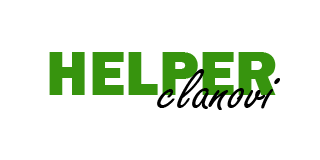
<style>
.page{position:relative;width:320px;height:160px;background:#ffffff}
.page>*{position:absolute;margin:0}
.t1{font:65.3px "FranklinGothic-Heavy";color:#37940e;scale:0.96 1}
.t2{font:61.7px "FreestyleScript-Regular";color:#000000;scale:1.13 1}
</style>
<div class="page">
<p class="t1" style="left:49px;top:52px;width:227px;height:43px">HELPER</p>
<p class="t2" style="left:157px;top:69px;width:123px;height:41px">clanovi</p>
</div>
